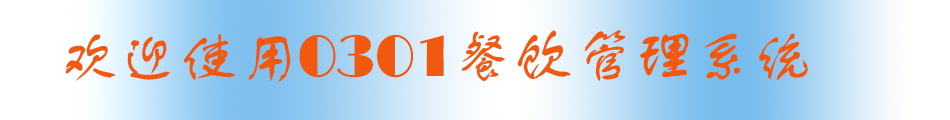
<style>
.page{position:relative;width:950px;height:120px}
.page>*{position:absolute;margin:0}
.t1{font:60px "FZSTK--GBK1-0";color:#f1590e}
.t2{font:60px "Broadway";color:#f1590e}
</style>
<div class="page">
<p class="t1" style="left:65px;top:30px;width:743px;height:52px">欢迎使用<span class="t2">0301</span>餐饮管理系统</p>
</div>
